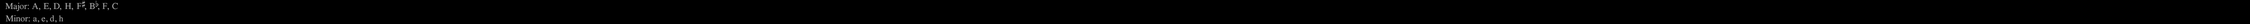
<style>
.page{position:relative;width:2250px;height:24px;background:#000000}
.page>*{position:absolute;margin:0}
.t1{font:9px "OpusChords";color:#ababab}
.t2{font:9px "Times-Roman";color:#ababab}
.t3{font:9px "OpusChords";letter-spacing:-0.04em;color:#ababab}
.t4{font:9px "Times-Roman";letter-spacing:-0.04em;color:#ababab}
.t5{font:9px "OpusChords";letter-spacing:-0.08em;color:#ababab}
.t6{font:9px "Times-Roman";letter-spacing:-0.08em;color:#ababab}
.t7{font:9px "OpusChords";letter-spacing:-0.05em;color:#ababab}
.t8{font:9px "Times-Roman";letter-spacing:-0.05em;color:#ababab}
.t9{font:9px "OpusChords";letter-spacing:-0.15em;color:#ababab}
.t10{font:9px "Times-Roman";letter-spacing:-0.15em;color:#ababab}
.t11{font:8.8px "Times-Roman";color:#ababab}
</style>
<div class="page">
<p class="t1" style="left:5px;top:0px;width:113px;height:11px">Major<span class="t2">:  </span><span class="t3">A</span><span class="t4">,</span>   E<span class="t2">,  </span><span class="t5">D</span><span class="t6">,   </span><span class="t7">H</span><span class="t8">,   </span>F<span class="t9">#</span><span class="t10">,</span>    B<span class="t9">b</span><span class="t10">,    </span><span class="t7">F</span><span class="t8">,</span>   C</p>
<p class="t1" style="left:6px;top:15px;width:57px;height:8px">Minor<span class="t2">:</span>  a<span class="t2">,</span>  e<span class="t2">,</span>  d<span class="t2">,  </span><span class="t11">h</span></p>
</div>
